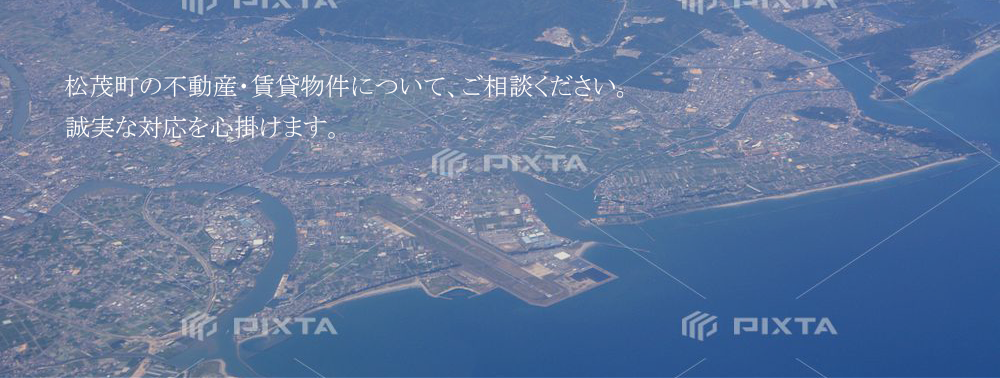
<style>
.page{position:relative;width:1000px;height:378px}
.page>*{position:absolute;margin:0}
.t1{font:25px "MS-PMincho";color:#ffffff}
</style>
<div class="page">
<p class="t1" style="left:65px;top:74px;width:559px;height:24px">松茂町の不動産・賃貸物件について、ご相談ください。</p>
<p class="t1" style="left:65px;top:115px;width:270px;height:24px">誠実な対応を心掛けます。</p>
</div>
